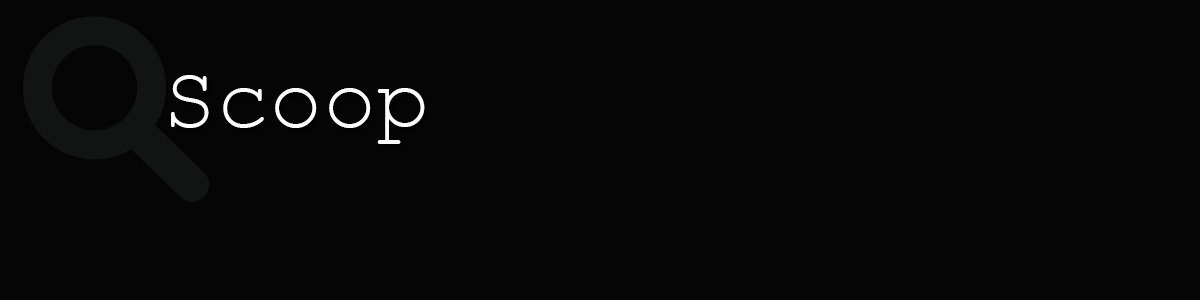
<style>
.page{position:relative;width:1200px;height:300px;background:#050505}
.page>*{position:absolute;margin:0}
.t1{font:89px "CourierNewPSMT";color:#ffffff}
</style>
<div class="page">
<p class="t1" style="left:171px;top:75px;width:254px;height:69px">Scoop</p>
</div>
